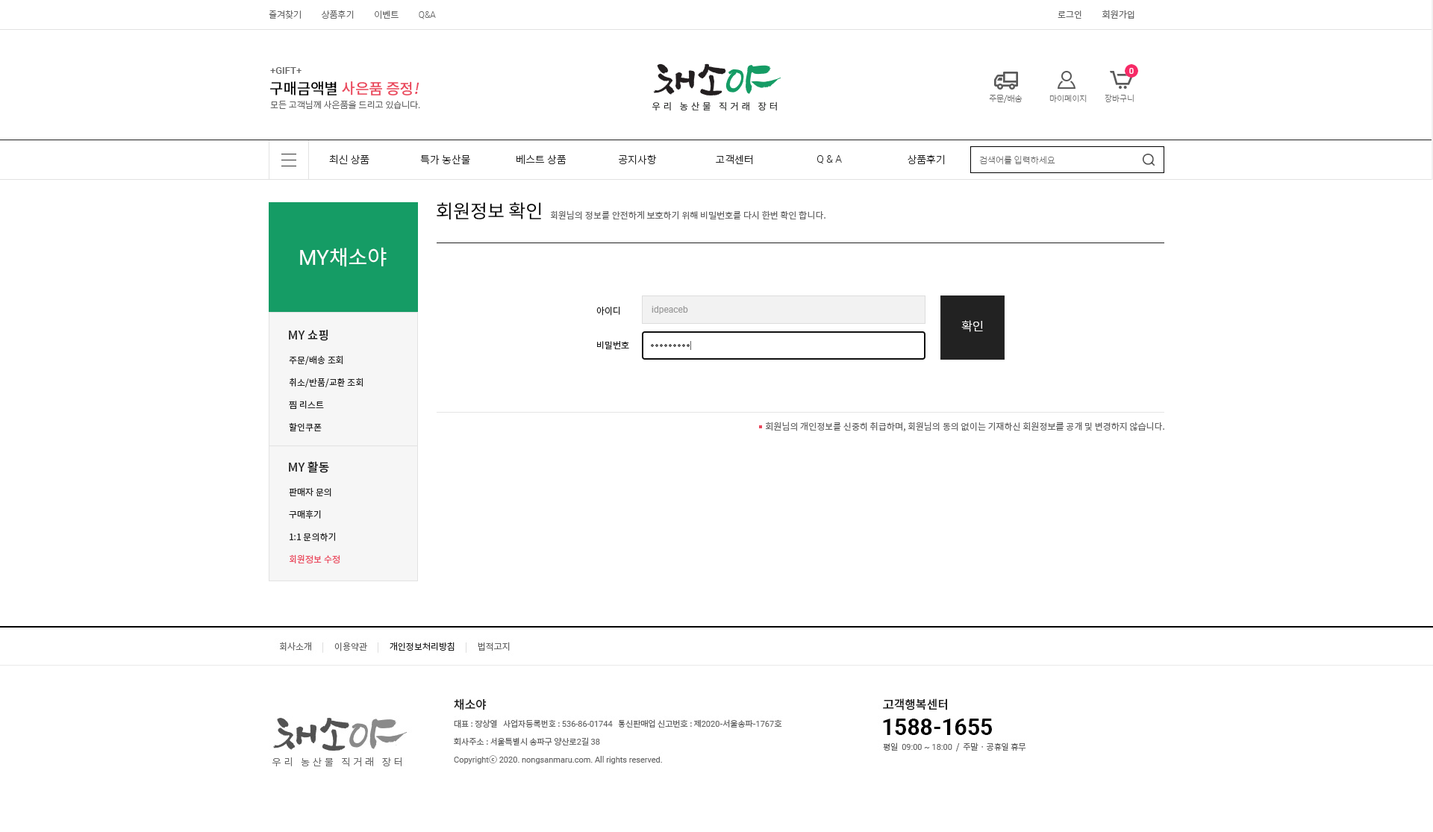
<style>
.page{position:relative;width:1433px;height:832px;background:#ffffff}
.page>*{position:absolute;margin:0}
.t1{font:9px "NotoSansCJKkr-Light";color:#666666}
.t2{font:9px "Roboto-Light";color:#666666}
.t3{font:9px "NotoSansCJKkr-DemiLight";color:#666666}
.t4{font:9.7px "Roboto-Medium";color:#666666}
.t5{font:14.9px "NotoSansCJKkr-Medium";color:#ea475c}
.t6{font:14.9px "NotoSansCJKkr-Medium";color:#000000}
.t7{font:14.9px "NotoSansCJKkr-Medium";color:#ea475c;font-style:italic}
.t8{font:8.2px "NotoSansCJKkr-Thin";color:#666666}
.t9{font:10.4px "NotoSansCJKkr-Light";color:#222222}
.t10{font:10.4px "Roboto-Light";color:#222222}
.t11{font:9px "NotoSansCJKkr-Thin";color:#666666}
.t12{font:18.7px "NotoSansCJKkr-Regular";color:#000000}
.t13{font:9px "NotoSansCJKkr-Regular";color:#666666}
.t14{font:20.9px "NotoSansCJKkr-Regular";color:#ffffff}
.t15{font:20.9px "Roboto-Regular";color:#ffffff}
.t16{font:9px "Roboto-Regular";color:#999999}
.t17{font:9px "NotoSansCJKkr-Regular";color:#222222}
.t18{font:11.9px "NotoSansCJKkr-Medium";color:#222222}
.t19{font:11.9px "NotoSansCJKkr-Light";color:#ffffff}
.t20{font:9px/22.4px "NotoSansCJKkr-Regular";color:#222222}
.t21{font:9px/22.4px "NotoSansCJKkr-Regular";color:#ea475c}
</style>
<div class="page">
<p class="t1" style="left:269px;top:10px;width:167px;height:9px">즐겨찾기          상품후기          이벤트          <span class="t2">Q&amp;A</span></p>
<p class="t3" style="left:1058px;top:10px;width:76px;height:9px">로그인          회원가입</p>
<p class="t4" style="left:270px;top:67px;width:32px;height:7px">+GIFT+</p>
<p class="t5" style="left:270px;top:81px;width:149px;height:15px"><span class="t6">구매금액별 </span>사은품 증정<span class="t7">!</span></p>
<p class="t1" style="left:270px;top:100px;width:150px;height:9px">모든 고객님께 사은품을 드리고 있습니다.</p>
<p class="t8" style="left:989px;top:94px;width:33px;height:9px">주문/배송</p>
<p class="t8" style="left:1049px;top:95px;width:38px;height:8px">마이페이지</p>
<p class="t8" style="left:1105px;top:94px;width:29px;height:9px">장바구니</p>
<p class="t9" style="left:329px;top:154px;width:40px;height:10px">최신 상품</p>
<p class="t9" style="left:420px;top:154px;width:50px;height:11px">특가 농산물</p>
<p class="t9" style="left:516px;top:154px;width:50px;height:11px">베스트 상품</p>
<p class="t9" style="left:619px;top:154px;width:38px;height:11px">공지사항</p>
<p class="t9" style="left:716px;top:154px;width:37px;height:11px">고객센터</p>
<p class="t10" style="left:817px;top:155px;width:25px;height:9px">Q &amp; A</p>
<p class="t9" style="left:908px;top:154px;width:37px;height:11px">상품후기</p>
<p class="t11" style="left:979px;top:155px;width:76px;height:10px">검색어를 입력하세요</p>
<p class="t12" style="left:437px;top:202px;width:104px;height:18px">회원정보 확인</p>
<p class="t13" style="left:551px;top:210px;width:274px;height:10px">회원님의 정보를 안전하게 보호하기 위해 비밀번호를 다시 한번 확인 합니다.</p>
<p class="t14" style="left:300px;top:247px;width:87px;height:20px"><span class="t15">MY</span>채소야</p>
<p class="t16" style="left:652px;top:306px;width:36px;height:8px">idpeaceb</p>
<p class="t17" style="left:596px;top:307px;width:24px;height:9px">아이디</p>
<p class="t18" style="left:289px;top:329px;width:39px;height:12px">MY 쇼핑</p>
<p class="t19" style="left:961px;top:320px;width:22px;height:12px">확인</p>
<p class="t17" style="left:597px;top:341px;width:32px;height:8px">비밀번호</p>
<p class="t20" style="left:289px;top:355px;width:74px;height:77px">주문/배송 조회<br>취소/반품/교환 조회<br>찜 리스트<br>할인쿠폰</p>
<p class="t13" style="left:766px;top:422px;width:398px;height:10px">회원님의 개인정보를 신중히 취급하며, 회원님의 동의 없이는 기재하신 회원정보를 공개 및 변경하지 않습니다.</p>
<p class="t18" style="left:289px;top:461px;width:40px;height:12px">MY 활동</p>
<p class="t20" style="left:289px;top:487px;width:51px;height:76px">판매자 문의<br>구매후기<br>1:1 문의하기<br><span class="t21">회원정보 수정</span></p>
</div>
